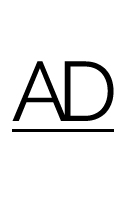
<style>
.page{position:relative;width:124px;height:200px;background:#ffffff}
.page>*{position:absolute;margin:0}
.t1{font:84px "Raleway-Regular";letter-spacing:-0.13em;color:#000000}
</style>
<div class="page">
<p class="t1" style="left:12px;top:61px;width:102px;height:60px">AD</p>
</div>
